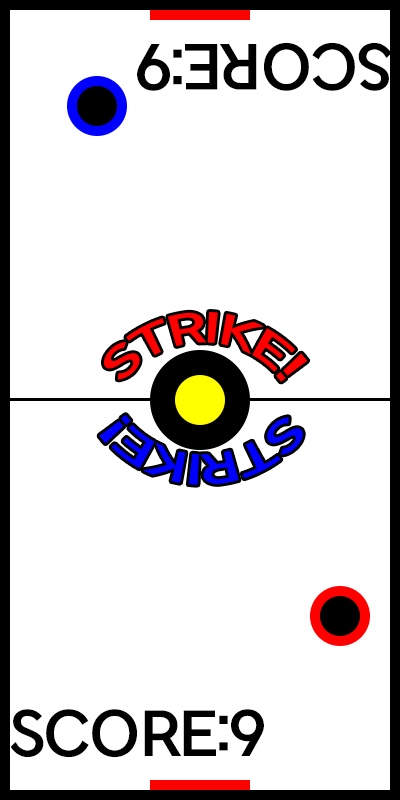
<style>
.page{position:relative;width:400px;height:800px;background:#ffffff}
.page>*{position:absolute;margin:0}
.t1{font:60px "NEXONLv1GothicOTFBold";color:#000000}
.t2{font:40px "NEXONLv1GothicOTFBold";color:#ff0000}
.t3{font:40px "NEXONLv1GothicOTFBold";color:#0000ff}
</style>
<div class="page">
<p class="t1" style="left:137px;top:42px;width:255px;height:49px;rotate:180deg">SCORE:9</p>
<p class="t2" style="left:103px;top:312px;width:205px;height:70px;text-align:center">STRIKE!</p>
<p class="t3" style="left:99px;top:415px;width:204px;height:70px;rotate:180deg">STRIKE!</p>
<p class="t1" style="left:10px;top:709px;width:254px;height:49px">SCORE:9</p>
</div>
